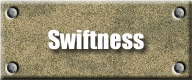
<style>
.page{position:relative;width:192px;height:80px}
.page>*{position:absolute;margin:0}
.t1{font:24px "Impact";color:#ffffff}
</style>
<div class="page">
<p class="t1" style="left:48px;top:29px;width:96px;height:21px">Swiftness</p>
</div>
